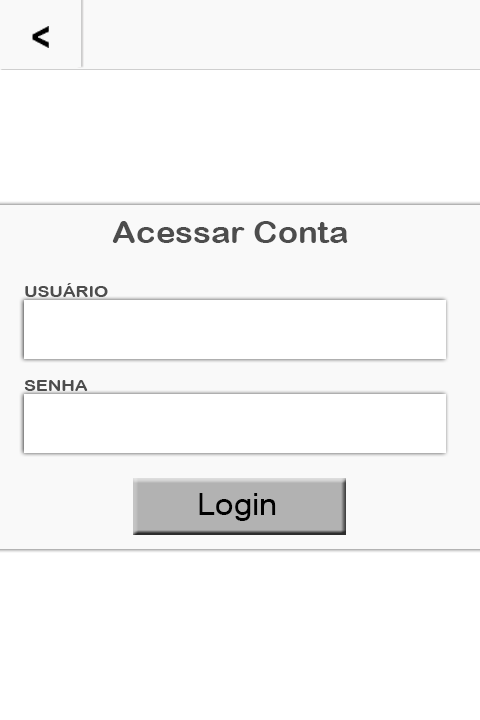
<style>
.page{position:relative;width:480px;height:720px;background:#ffffff}
.page>*{position:absolute;margin:0}
.t1{font:30px "ArialRoundedMTBold";color:#4c4c4c;scale:1.1 1}
.t2{font:30px "ArialMT";color:#000000;scale:1.1 1}
</style>
<div class="page">
<p class="t1" style="left:112px;top:221px;width:236px;height:22px">Acessar Conta</p>
<p class="t2" style="left:199px;top:493px;width:77px;height:28px">Login</p>
</div>
